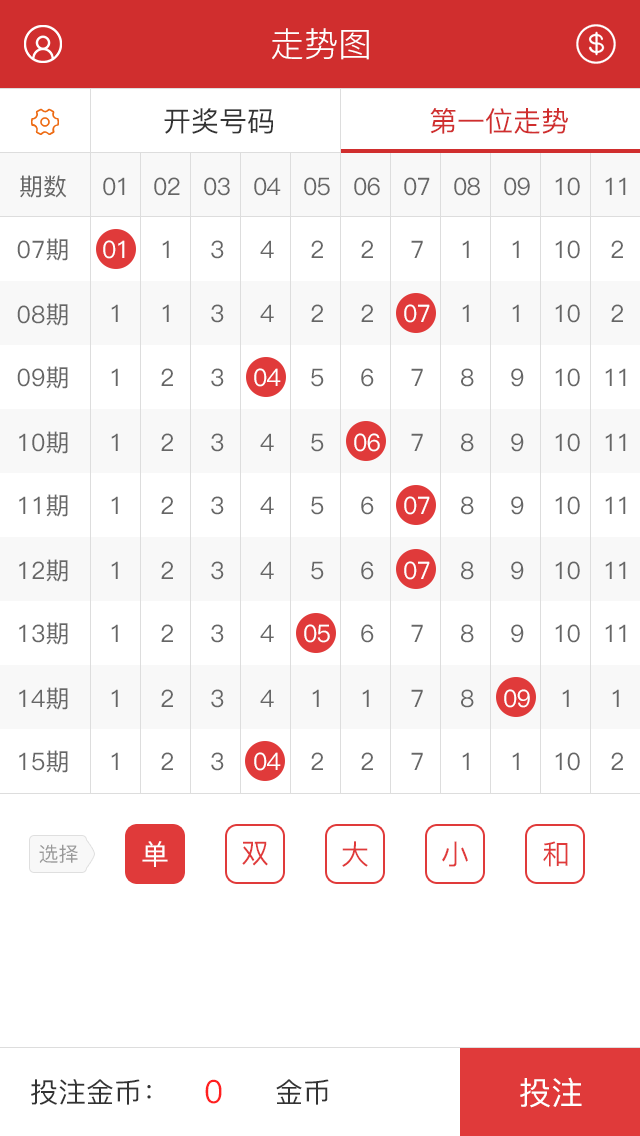
<style>
.page{position:relative;width:640px;height:1136px;background:#ffffff}
.page>*{position:absolute;margin:0}
.t1{font:34px "PingFang-SC-Regular";color:#ffffff}
.t2{font:28px "PingFang-SC-Medium";color:#333333}
.t3{font:28px "PingFang-SC-Medium";color:#d02e2e}
.t4{font:24px "PingFang-SC-Medium";color:#666666}
.t5{font:24px "PingFang-SC-Medium";letter-spacing:-0.05em;color:#666666}
.t6{font:24px "PingFang-SC-Medium";letter-spacing:-0.05em;color:#ffffff}
.t7{font:20px "PingFang-SC-Medium";color:#999999}
.t8{font:28px "PingFang-SC-Medium";color:#fffefe}
.t9{font:28px "PingFang-SC-Medium";color:#e03a3a}
.t10{font:32px "PingFang-SC-Medium";color:#ff1f1f}
.t11{font:32px "PingFang-SC-Medium";color:#ffffff}
</style>
<div class="page">
<p class="t1" style="left:272px;top:28px;width:97px;height:32px">走势图</p>
<p class="t2" style="left:164px;top:108px;width:109px;height:26px">开奖号码</p>
<p class="t3" style="left:430px;top:108px;width:138px;height:26px">第一位走势</p>
<p class="t4" style="left:20px;top:175px;width:47px;height:23px">期数</p>
<p class="t5" style="left:103px;top:177px;width:22px;height:19px">01</p>
<p class="t5" style="left:154px;top:177px;width:26px;height:19px">02</p>
<p class="t5" style="left:204px;top:177px;width:26px;height:19px">03</p>
<p class="t5" style="left:254px;top:177px;width:27px;height:19px">04</p>
<p class="t5" style="left:304px;top:177px;width:26px;height:19px">05</p>
<p class="t5" style="left:354px;top:177px;width:26px;height:19px">06</p>
<p class="t5" style="left:404px;top:177px;width:26px;height:19px">07</p>
<p class="t5" style="left:454px;top:177px;width:26px;height:19px">08</p>
<p class="t5" style="left:504px;top:177px;width:26px;height:19px">09</p>
<p class="t5" style="left:555px;top:177px;width:25px;height:19px">10</p>
<p class="t5" style="left:605px;top:177px;width:21px;height:18px">11</p>
<p class="t4" style="left:17px;top:238px;width:51px;height:23px">07期</p>
<p class="t6" style="left:103px;top:240px;width:22px;height:19px">01</p>
<p class="t5" style="left:162px;top:240px;width:7px;height:18px">1</p>
<p class="t5" style="left:211px;top:240px;width:13px;height:19px">3</p>
<p class="t5" style="left:260px;top:240px;width:14px;height:18px">4</p>
<p class="t5" style="left:311px;top:240px;width:12px;height:18px">2</p>
<p class="t5" style="left:361px;top:240px;width:12px;height:18px">2</p>
<p class="t5" style="left:411px;top:240px;width:12px;height:18px">7</p>
<p class="t5" style="left:462px;top:240px;width:7px;height:18px">1</p>
<p class="t5" style="left:512px;top:240px;width:7px;height:18px">1</p>
<p class="t5" style="left:555px;top:240px;width:25px;height:19px">10</p>
<p class="t5" style="left:611px;top:240px;width:12px;height:18px">2</p>
<p class="t4" style="left:17px;top:303px;width:51px;height:23px">08期</p>
<p class="t5" style="left:111px;top:304px;width:7px;height:18px">1</p>
<p class="t5" style="left:162px;top:304px;width:7px;height:18px">1</p>
<p class="t5" style="left:211px;top:304px;width:13px;height:19px">3</p>
<p class="t5" style="left:260px;top:304px;width:14px;height:18px">4</p>
<p class="t5" style="left:311px;top:304px;width:12px;height:18px">2</p>
<p class="t5" style="left:361px;top:304px;width:12px;height:18px">2</p>
<p class="t6" style="left:404px;top:304px;width:26px;height:19px">07</p>
<p class="t5" style="left:462px;top:304px;width:7px;height:18px">1</p>
<p class="t5" style="left:512px;top:304px;width:7px;height:18px">1</p>
<p class="t5" style="left:555px;top:304px;width:25px;height:19px">10</p>
<p class="t5" style="left:611px;top:304px;width:12px;height:18px">2</p>
<p class="t4" style="left:17px;top:366px;width:51px;height:23px">09期</p>
<p class="t5" style="left:111px;top:368px;width:7px;height:18px">1</p>
<p class="t5" style="left:161px;top:368px;width:12px;height:18px">2</p>
<p class="t5" style="left:211px;top:368px;width:13px;height:19px">3</p>
<p class="t6" style="left:254px;top:368px;width:27px;height:19px">04</p>
<p class="t5" style="left:311px;top:368px;width:13px;height:19px">5</p>
<p class="t5" style="left:361px;top:368px;width:13px;height:19px">6</p>
<p class="t5" style="left:411px;top:368px;width:12px;height:18px">7</p>
<p class="t5" style="left:461px;top:368px;width:13px;height:19px">8</p>
<p class="t5" style="left:511px;top:368px;width:13px;height:19px">9</p>
<p class="t5" style="left:555px;top:368px;width:25px;height:19px">10</p>
<p class="t5" style="left:605px;top:368px;width:21px;height:18px">11</p>
<p class="t4" style="left:19px;top:431px;width:49px;height:23px">10期</p>
<p class="t5" style="left:111px;top:433px;width:7px;height:18px">1</p>
<p class="t5" style="left:161px;top:433px;width:12px;height:18px">2</p>
<p class="t5" style="left:211px;top:433px;width:13px;height:19px">3</p>
<p class="t5" style="left:260px;top:433px;width:14px;height:18px">4</p>
<p class="t5" style="left:311px;top:433px;width:13px;height:19px">5</p>
<p class="t6" style="left:354px;top:433px;width:26px;height:19px">06</p>
<p class="t5" style="left:411px;top:433px;width:12px;height:18px">7</p>
<p class="t5" style="left:461px;top:433px;width:13px;height:19px">8</p>
<p class="t5" style="left:511px;top:433px;width:13px;height:19px">9</p>
<p class="t5" style="left:555px;top:433px;width:25px;height:19px">10</p>
<p class="t5" style="left:605px;top:433px;width:21px;height:18px">11</p>
<p class="t4" style="left:19px;top:494px;width:49px;height:23px">11期</p>
<p class="t5" style="left:111px;top:496px;width:7px;height:18px">1</p>
<p class="t5" style="left:161px;top:496px;width:12px;height:18px">2</p>
<p class="t5" style="left:211px;top:496px;width:13px;height:19px">3</p>
<p class="t5" style="left:260px;top:496px;width:14px;height:18px">4</p>
<p class="t5" style="left:311px;top:496px;width:13px;height:19px">5</p>
<p class="t5" style="left:361px;top:496px;width:13px;height:19px">6</p>
<p class="t6" style="left:404px;top:496px;width:26px;height:19px">07</p>
<p class="t5" style="left:461px;top:496px;width:13px;height:19px">8</p>
<p class="t5" style="left:511px;top:496px;width:13px;height:19px">9</p>
<p class="t5" style="left:555px;top:496px;width:25px;height:19px">10</p>
<p class="t5" style="left:605px;top:496px;width:21px;height:18px">11</p>
<p class="t4" style="left:19px;top:559px;width:49px;height:23px">12期</p>
<p class="t5" style="left:111px;top:561px;width:7px;height:18px">1</p>
<p class="t5" style="left:161px;top:561px;width:12px;height:18px">2</p>
<p class="t5" style="left:211px;top:561px;width:13px;height:19px">3</p>
<p class="t5" style="left:260px;top:561px;width:14px;height:18px">4</p>
<p class="t5" style="left:311px;top:561px;width:13px;height:19px">5</p>
<p class="t5" style="left:361px;top:561px;width:13px;height:19px">6</p>
<p class="t6" style="left:404px;top:561px;width:26px;height:19px">07</p>
<p class="t5" style="left:461px;top:561px;width:13px;height:19px">8</p>
<p class="t5" style="left:511px;top:561px;width:13px;height:19px">9</p>
<p class="t5" style="left:555px;top:561px;width:25px;height:19px">10</p>
<p class="t5" style="left:605px;top:561px;width:21px;height:18px">11</p>
<p class="t4" style="left:19px;top:622px;width:49px;height:23px">13期</p>
<p class="t5" style="left:111px;top:624px;width:7px;height:18px">1</p>
<p class="t5" style="left:161px;top:624px;width:12px;height:18px">2</p>
<p class="t5" style="left:211px;top:624px;width:13px;height:19px">3</p>
<p class="t5" style="left:260px;top:624px;width:14px;height:18px">4</p>
<p class="t6" style="left:304px;top:624px;width:26px;height:19px">05</p>
<p class="t5" style="left:361px;top:624px;width:13px;height:19px">6</p>
<p class="t5" style="left:411px;top:624px;width:12px;height:18px">7</p>
<p class="t5" style="left:461px;top:624px;width:13px;height:19px">8</p>
<p class="t5" style="left:511px;top:624px;width:13px;height:19px">9</p>
<p class="t5" style="left:555px;top:624px;width:25px;height:19px">10</p>
<p class="t5" style="left:605px;top:624px;width:21px;height:18px">11</p>
<p class="t4" style="left:19px;top:687px;width:49px;height:23px">14期</p>
<p class="t5" style="left:111px;top:689px;width:7px;height:18px">1</p>
<p class="t5" style="left:161px;top:689px;width:12px;height:18px">2</p>
<p class="t5" style="left:211px;top:689px;width:13px;height:19px">3</p>
<p class="t5" style="left:260px;top:689px;width:14px;height:18px">4</p>
<p class="t5" style="left:312px;top:689px;width:7px;height:18px">1</p>
<p class="t5" style="left:362px;top:689px;width:7px;height:18px">1</p>
<p class="t5" style="left:411px;top:689px;width:12px;height:18px">7</p>
<p class="t5" style="left:461px;top:689px;width:13px;height:19px">8</p>
<p class="t6" style="left:504px;top:689px;width:26px;height:19px">09</p>
<p class="t5" style="left:562px;top:689px;width:7px;height:18px">1</p>
<p class="t5" style="left:612px;top:689px;width:7px;height:18px">1</p>
<p class="t4" style="left:19px;top:750px;width:49px;height:23px">15期</p>
<p class="t5" style="left:111px;top:752px;width:7px;height:18px">1</p>
<p class="t5" style="left:161px;top:752px;width:12px;height:18px">2</p>
<p class="t5" style="left:211px;top:752px;width:13px;height:19px">3</p>
<p class="t6" style="left:254px;top:752px;width:27px;height:19px">04</p>
<p class="t5" style="left:311px;top:752px;width:12px;height:18px">2</p>
<p class="t5" style="left:361px;top:752px;width:12px;height:18px">2</p>
<p class="t5" style="left:411px;top:752px;width:12px;height:18px">7</p>
<p class="t5" style="left:462px;top:752px;width:7px;height:18px">1</p>
<p class="t5" style="left:512px;top:752px;width:7px;height:18px">1</p>
<p class="t5" style="left:555px;top:752px;width:25px;height:19px">10</p>
<p class="t5" style="left:611px;top:752px;width:12px;height:18px">2</p>
<p class="t7" style="left:39px;top:844px;width:39px;height:19px">选择</p>
<p class="t8" style="left:142px;top:841px;width:26px;height:26px">单</p>
<p class="t9" style="left:242px;top:841px;width:26px;height:25px">双</p>
<p class="t9" style="left:342px;top:841px;width:26px;height:26px">大</p>
<p class="t9" style="left:442px;top:841px;width:26px;height:26px">小</p>
<p class="t9" style="left:543px;top:841px;width:25px;height:26px">和</p>
<p class="t2" style="left:31px;top:1079px;width:120px;height:26px">投注金币：</p>
<p class="t10" style="left:205px;top:1079px;width:17px;height:25px">0</p>
<p class="t2" style="left:276px;top:1079px;width:53px;height:26px">金币</p>
<p class="t11" style="left:520px;top:1077px;width:62px;height:31px">投注</p>
</div>
